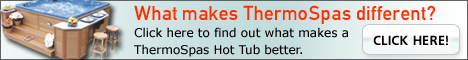
<style>
.page{position:relative;width:468px;height:60px}
.page>*{position:absolute;margin:0}
.t1{font:12px/17px "Verdana";color:#000000}
.t2{font:20px/17px "DinC";color:#ff3000}
.t3{font:13px "font180";color:#000000}
</style>
<div class="page">
<p class="t1" style="left:134px;top:5px;width:301px;height:52px"><span class="t2">What makes ThermoSpas different?<br></span>Click here to find out what makes a <br>ThermoSpas Hot Tub better.</p>
<p class="t3" style="left:373px;top:35px;width:75px;height:10px">CLICK HERE!</p>
</div>
